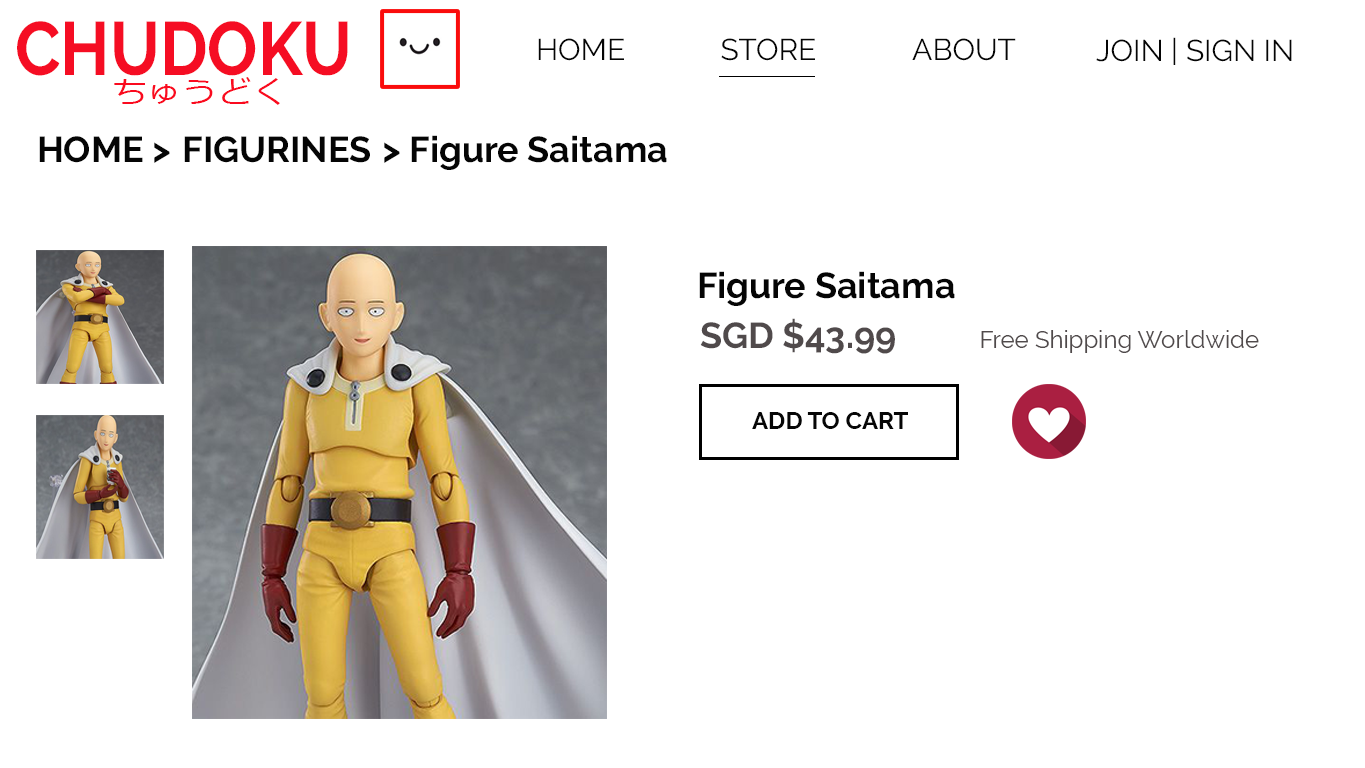
<style>
.page{position:relative;width:1365px;height:768px;background:#ffffff}
.page>*{position:absolute;margin:0}
.t1{font:75.2px "Raleway-Bold";color:#f50d23;scale:0.89 1}
.t2{font:30px "Raleway-Regular";color:#050505}
.t3{font:31.2px "Meiryo";color:#fa0a1f;scale:1.13 1}
.t4{font:36px "Raleway-Bold";color:#050505}
.t5{font:36px "Raleway-Bold";color:#504a4b}
.t6{font:24px "Raleway-Regular";color:#504a4b}
.t7{font:24px "Raleway-Bold";color:#060606}
</style>
<div class="page">
<p class="t1" style="left:17px;top:21px;width:331px;height:55px">CHUDOKU</p>
<p class="t2" style="left:538px;top:38px;width:86px;height:23px">HOME</p>
<p class="t2" style="left:721px;top:38px;width:94px;height:23px">STORE</p>
<p class="t2" style="left:912px;top:38px;width:104px;height:23px">ABOUT</p>
<p class="t2" style="left:1096px;top:37px;width:196px;height:28px">JOIN | SIGN IN</p>
<p class="t3" style="left:114px;top:77px;width:166px;height:28px">ちゅうどく</p>
<p class="t4" style="left:39px;top:136px;width:131px;height:27px">HOME &gt;</p>
<p class="t4" style="left:184px;top:136px;width:186px;height:27px">FIGURINES</p>
<p class="t4" style="left:384px;top:135px;width:283px;height:35px">&gt; Figure Saitama</p>
<p class="t4" style="left:699px;top:271px;width:256px;height:35px">Figure Saitama</p>
<p class="t5" style="left:700px;top:318px;width:195px;height:36px">SGD $43.99</p>
<p class="t6" style="left:981px;top:330px;width:278px;height:23px">Free Shipping Worldwide</p>
<p class="t7" style="left:752px;top:412px;width:156px;height:17px">ADD TO CART</p>
</div>
